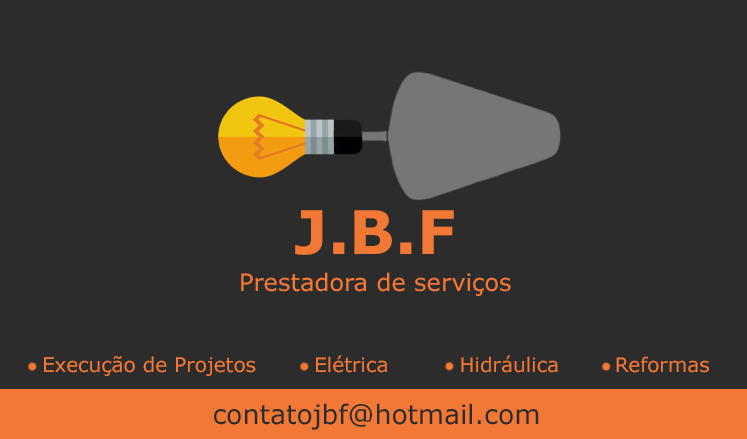
<style>
.page{position:relative;width:747px;height:439px;background:#2c2c2c}
.page>*{position:absolute;margin:0}
.t1{font:60px "Verdana-Bold";color:#f27935}
.t2{font:24px "Verdana";color:#f27935}
.t3{font:20.2px "Verdana";color:#f27935}
.t4{font:20px "Verdana";color:#f27935}
.t5{font:26.7px "Verdana";color:#2c2c2c}
</style>
<div class="page">
<p class="t1" style="left:295px;top:210px;width:159px;height:45px">J.B.F</p>
<p class="t2" style="left:241px;top:272px;width:270px;height:24px">Prestadora de serviços</p>
<p class="t3" style="left:44px;top:356px;width:212px;height:20px">Execução de Projetos</p>
<p class="t4" style="left:316px;top:355px;width:71px;height:18px">Elétrica</p>
<p class="t4" style="left:461px;top:355px;width:97px;height:18px">Hidráulica</p>
<p class="t4" style="left:616px;top:356px;width:93px;height:17px">Reformas</p>
<p class="t5" style="left:214px;top:403px;width:325px;height:27px">contatojbf@hotmail.com</p>
</div>
